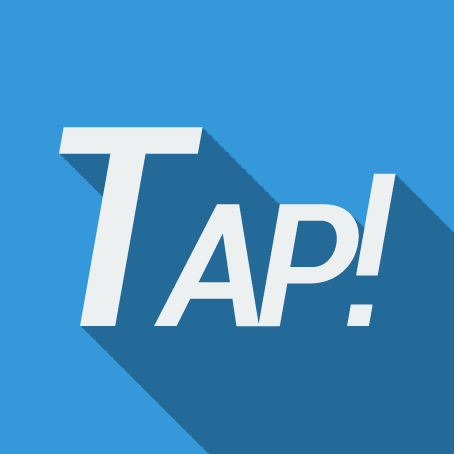
<style>
.page{position:relative;width:454px;height:454px;background:#3498db}
.page>*{position:absolute;margin:0}
.t1{font:213.5px "Roboto-Condensed";letter-spacing:-0.08em;color:#ecf0f1;font-variant:small-caps;font-style:italic}
.t2{font:349.5px "Roboto-Condensed";letter-spacing:-0.08em;color:#ecf0f1;font-variant:small-caps;font-style:italic}
</style>
<div class="page">
<p class="t1" style="left:59px;top:127px;width:337px;height:200px"><span class="t2">T</span>ap!</p>
</div>
